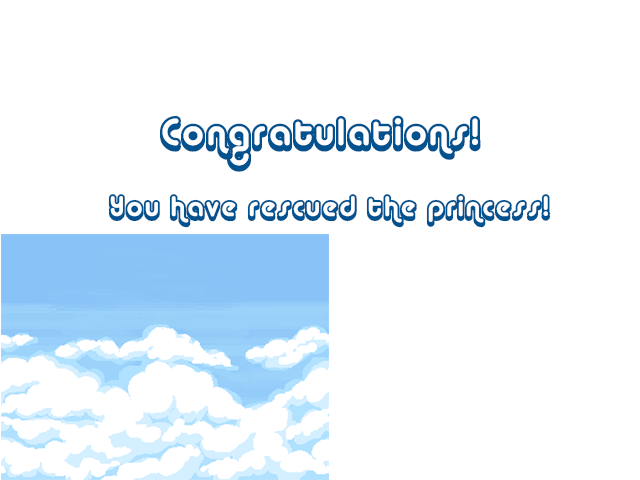
<style>
.page{position:relative;width:640px;height:480px;background:#ffffff}
.page>*{position:absolute;margin:0}
.t1{font:37.7px "AlbaSuper";letter-spacing:0.05em;color:#01528f}
.t2{font:28.3px "AlbaSuper";letter-spacing:0.05em;color:#01528f}
</style>
<div class="page">
<p class="t1" style="left:160px;top:115px;width:321px;height:57px">Congratulations!</p>
<p class="t2" style="left:108px;top:193px;width:443px;height:35px">You have rescued the princess!</p>
</div>
